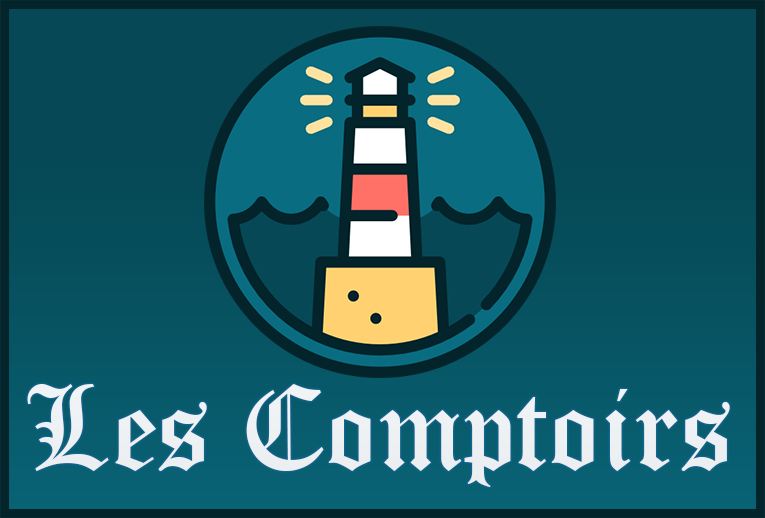
<style>
.page{position:relative;width:765px;height:518px;background:#064855}
.page>*{position:absolute;margin:0}
.t1{font:117px "OldEnglishTextMT";color:#edf1f3}
</style>
<div class="page">
<p class="t1" style="left:27px;top:384px;width:703px;height:103px">Les Comptoirs</p>
</div>
